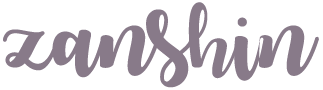
<style>
.page{position:relative;width:323px;height:90px;background:#ffffff}
.page>*{position:absolute;margin:0}
.t1{font:90px "AutumninNovember";color:#887a89}
.t2{font:70px "AutumninNovember";color:#887a89}
</style>
<div class="page">
<p class="t1" style="left:3px;top:2px;width:316px;height:86px">zans<span class="t2">h</span>in</p>
</div>
